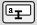
<style>
.page{position:relative;width:37px;height:25px;background:#f0f0f0}
.page>*{position:absolute;margin:0}
.t1{font:10px "TimesNewRomanPSMT";color:#000000}
</style>
<div class="page">
<p class="t1" style="left:8px;top:8px;width:5px;height:5px">a</p>
</div>
